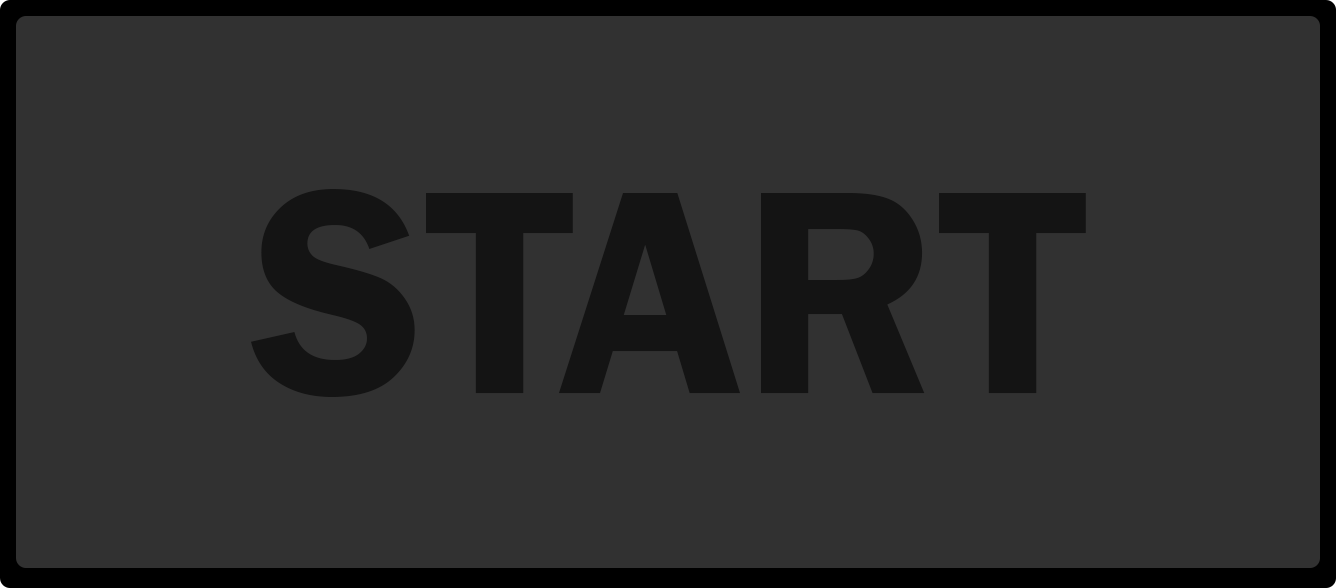
<style>
.page{position:relative;width:1336px;height:588px;background:#313131}
.page>*{position:absolute;margin:0}
.t1{font:300px "FranklinGothic-Demi";color:#141414}
</style>
<div class="page">
<p class="t1" style="left:250px;top:189px;width:836px;height:208px">START</p>
</div>
